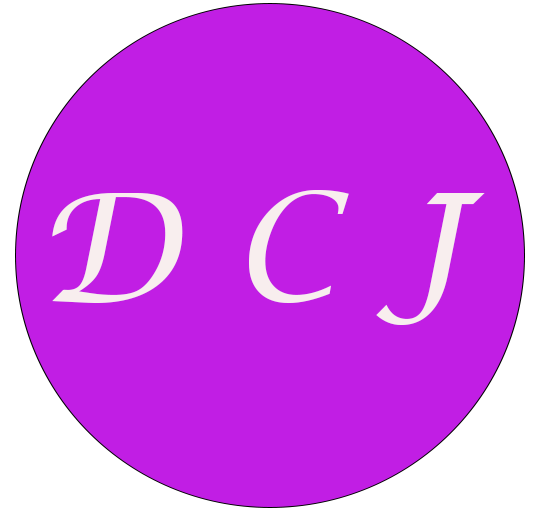
<style>
.page{position:relative;width:534px;height:509px;background:#c11ee4}
.page>*{position:absolute;margin:0}
.t1{font:150px "LucidaCalligraphy-Italic";color:#f8eeee}
</style>
<div class="page">
<p class="t1" style="left:52px;top:190px;width:433px;height:135px">D C J</p>
</div>
